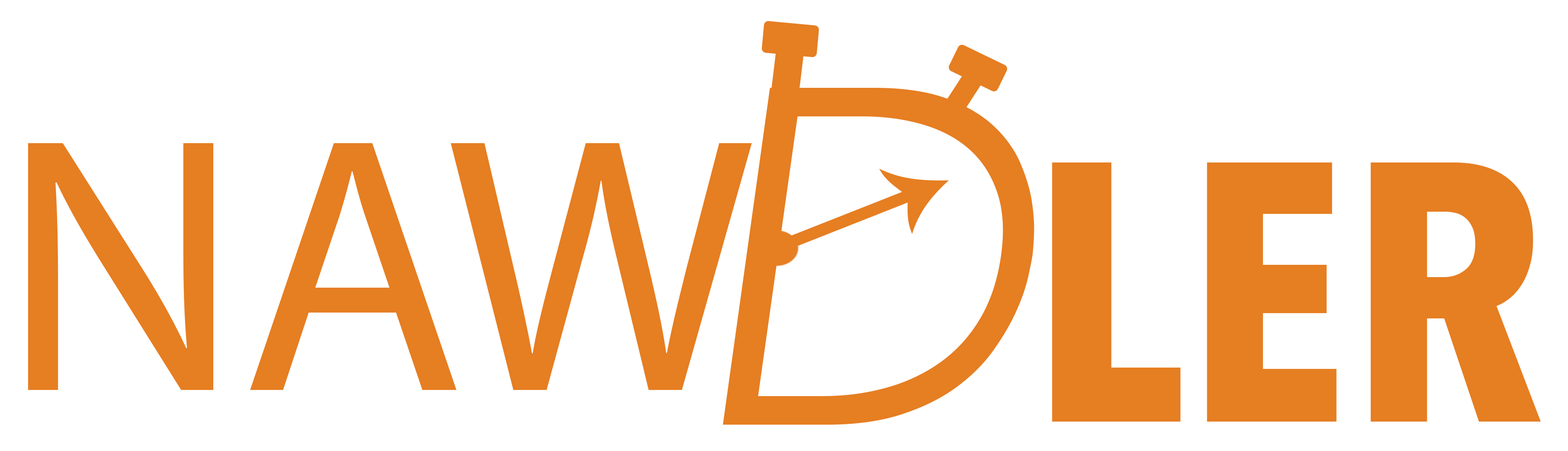
<style>
.page{position:relative;width:1568px;height:451px;background:#ffffff}
.page>*{position:absolute;margin:0}
.t1{font:475.4px "Avenir-LightOblique";color:#e67e22}
.t2{font:365.7px "MyriadPro-Regular";color:#e67e22}
.t3{font:365.7px "AvenirNextCondensed-Bold";color:#e67e22}
</style>
<div class="page">
<p class="t1" style="left:723px;top:88px;width:311px;height:336px">D</p>
<p class="t2" style="left:28px;top:143px;width:724px;height:247px">NAW</p>
<p class="t3" style="left:1052px;top:162px;width:489px;height:259px">LER</p>
</div>
